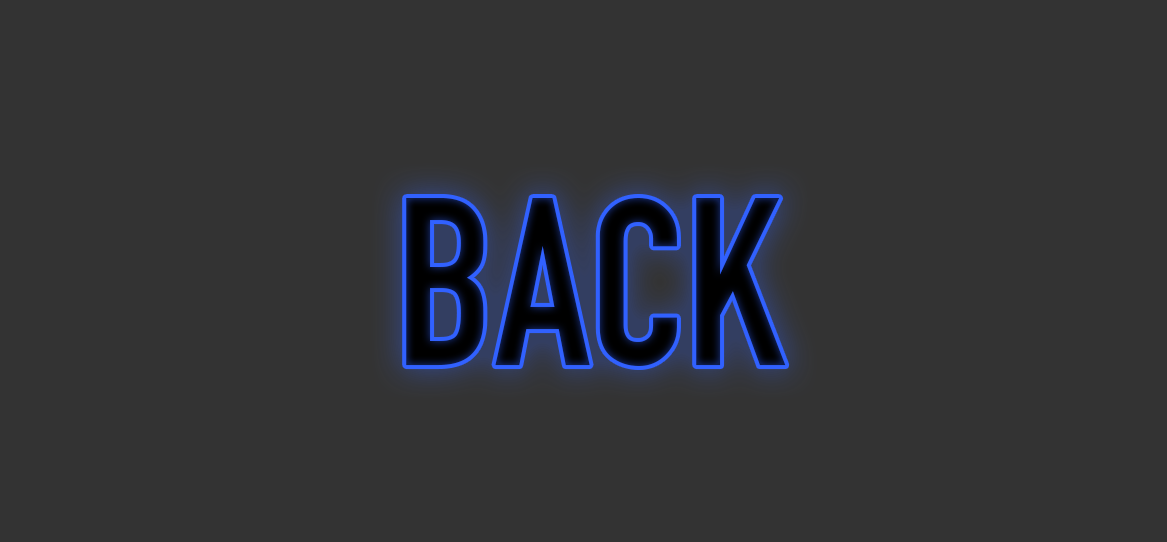
<style>
.page{position:relative;width:1167px;height:542px;background:#333333}
.page>*{position:absolute;margin:0}
.t1{font:233.7px "DINEngschrift";color:#02040b}
</style>
<div class="page">
<p class="t1" style="left:406px;top:198px;width:380px;height:168px">BACK</p>
</div>
